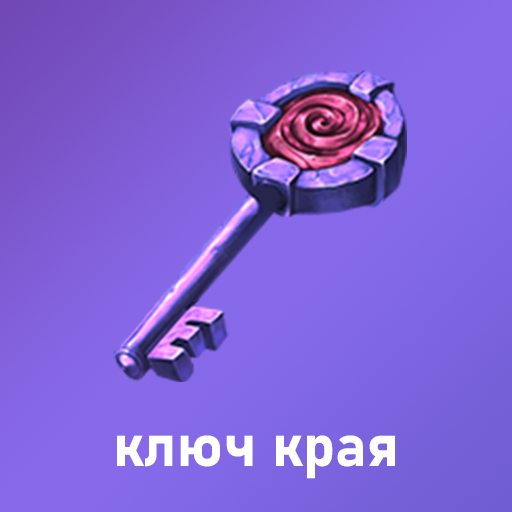
<style>
.page{position:relative;width:512px;height:512px}
.page>*{position:absolute;margin:0}
.t1{font:59.5px "Bahnschrift-Bold";color:#ffffff}
</style>
<div class="page">
<p class="t1" style="left:117px;top:435px;width:278px;height:44px">ключ края</p>
</div>
